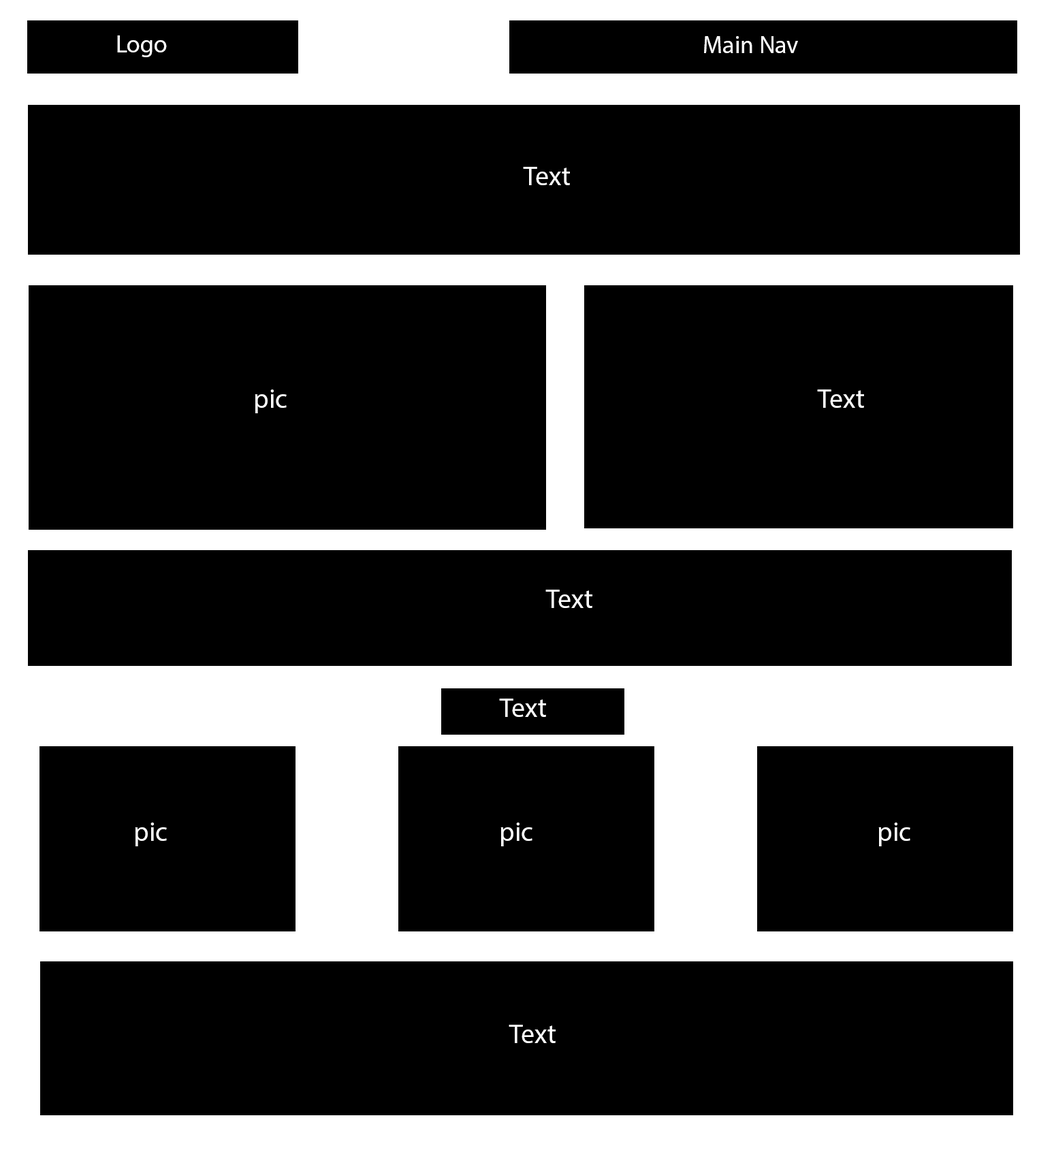
<style>
.page{position:relative;width:1037px;height:1150px;background:#000000}
.page>*{position:absolute;margin:0}
.t1{font:24.5px "MyriadPro-Regular";color:#ffffff}
.t2{font:27.2px "MyriadPro-Regular";color:#ffffff}
</style>
<div class="page">
<p class="t1" style="left:117px;top:35px;width:50px;height:22px">Logo</p>
<p class="t1" style="left:704px;top:36px;width:94px;height:17px">Main Nav</p>
<p class="t2" style="left:523px;top:167px;width:47px;height:18px">Text</p>
<p class="t2" style="left:255px;top:389px;width:32px;height:24px">pic</p>
<p class="t2" style="left:817px;top:389px;width:47px;height:19px">Text</p>
<p class="t2" style="left:545px;top:590px;width:47px;height:18px">Text</p>
<p class="t2" style="left:499px;top:699px;width:47px;height:18px">Text</p>
<p class="t2" style="left:135px;top:822px;width:32px;height:24px">pic</p>
<p class="t2" style="left:500px;top:822px;width:32px;height:24px">pic</p>
<p class="t2" style="left:878px;top:822px;width:32px;height:24px">pic</p>
<p class="t2" style="left:509px;top:1025px;width:47px;height:18px">Text</p>
</div>
